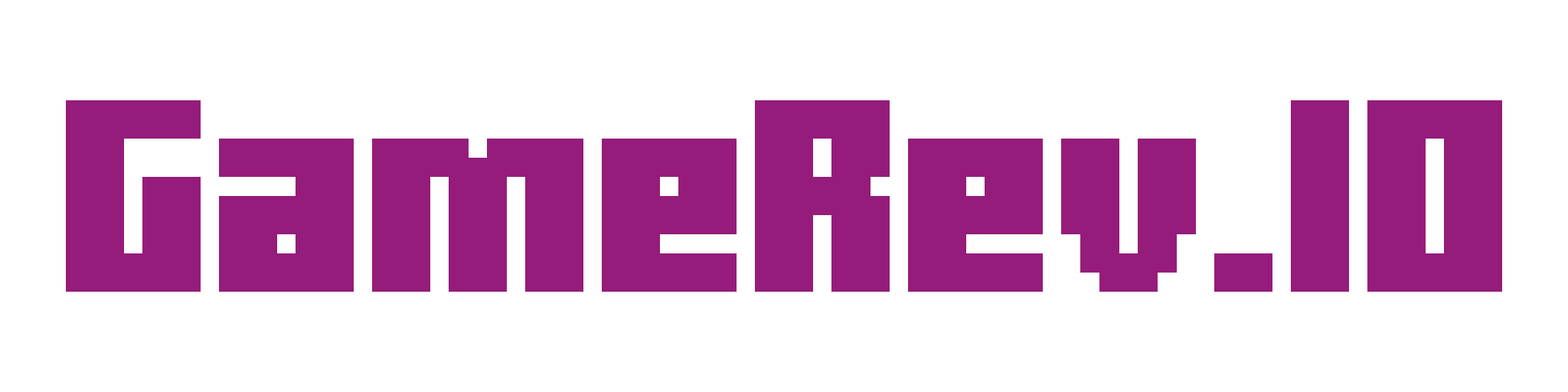
<style>
.page{position:relative;width:1568px;height:392px;background:#ffffff}
.page>*{position:absolute;margin:0}
.t1{font:196px "MinercraftoryRegular";color:#951c7a}
</style>
<div class="page">
<p class="t1" style="left:66px;top:100px;width:1436px;height:192px">GameRev.IO</p>
</div>
